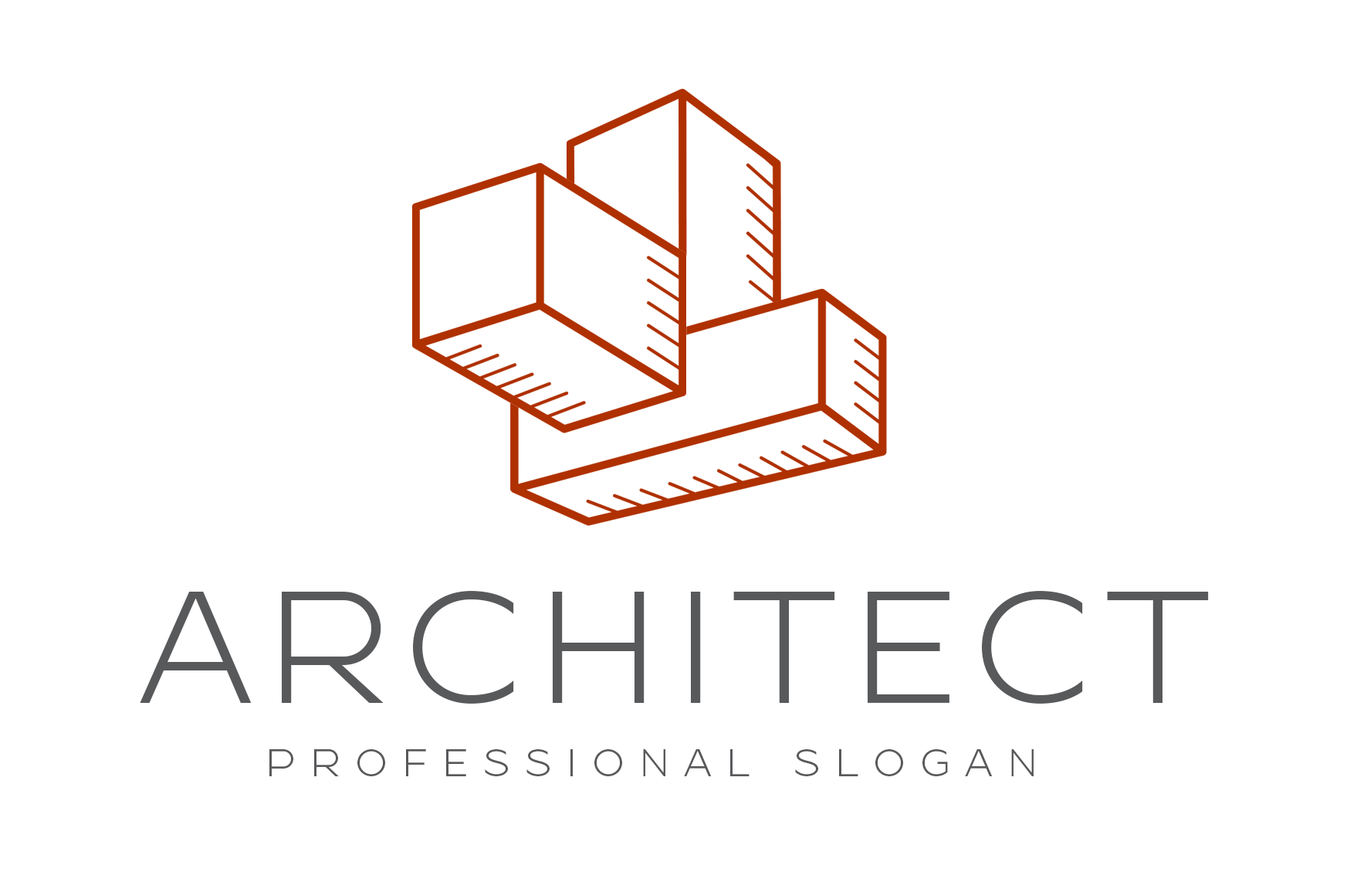
<style>
.page{position:relative;width:1357px;height:879px;background:#ffffff}
.page>*{position:absolute;margin:0}
.t1{font:158.6px "Resamitz";letter-spacing:0.08em;color:#58595b}
.t2{font:38.5px "Resamitz";letter-spacing:0.38em;color:#58595b}
</style>
<div class="page">
<p class="t1" style="left:140px;top:591px;width:1069px;height:112px">ARCHITECT</p>
<p class="t2" style="left:269px;top:749px;width:765px;height:27px">PROFESSIONAL SLOGAN</p>
</div>
